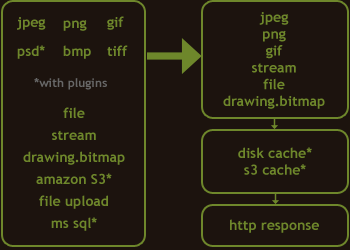
<style>
.page{position:relative;width:350px;height:250px;background:#1c130e}
.page>*{position:absolute;margin:0}
.t1{font:14px "TrebuchetMS-Bold";color:#6e872b}
.t2{font:12px "TrebuchetMS-Bold";color:#686867}
.t3{font:14px/22px "TrebuchetMS-Bold";color:#6e872b}
</style>
<div class="page">
<p class="t1" style="left:17px;top:17px;width:29px;height:13px">jpeg</p>
<p class="t1" style="left:107px;top:16px;width:17px;height:14px">gif</p>
<p class="t1" style="left:223px;top:12px;width:102px;height:97px;text-align:center">jpeg<br>png<br>gif<br>stream<br>file<br>drawing.bitmap</p>
<p class="t1" style="left:63px;top:20px;width:24px;height:11px">png</p>
<p class="t1" style="left:17px;top:45px;width:28px;height:14px">psd*</p>
<p class="t1" style="left:63px;top:45px;width:28px;height:14px">bmp</p>
<p class="t1" style="left:107px;top:45px;width:21px;height:11px">tiff</p>
<p class="t2" style="left:34px;top:78px;width:73px;height:12px">*with plugins</p>
<p class="t3" style="left:23px;top:107px;width:102px;height:124px;text-align:center">file<br>stream<br>drawing.bitmap<br>amazon S3*<br>file upload<br>ms sql*</p>
<p class="t1" style="left:238px;top:147px;width:74px;height:28px;text-align:center">disk cache*<br>s3 cache*</p>
<p class="t1" style="left:230px;top:219px;width:89px;height:14px">http response</p>
</div>
